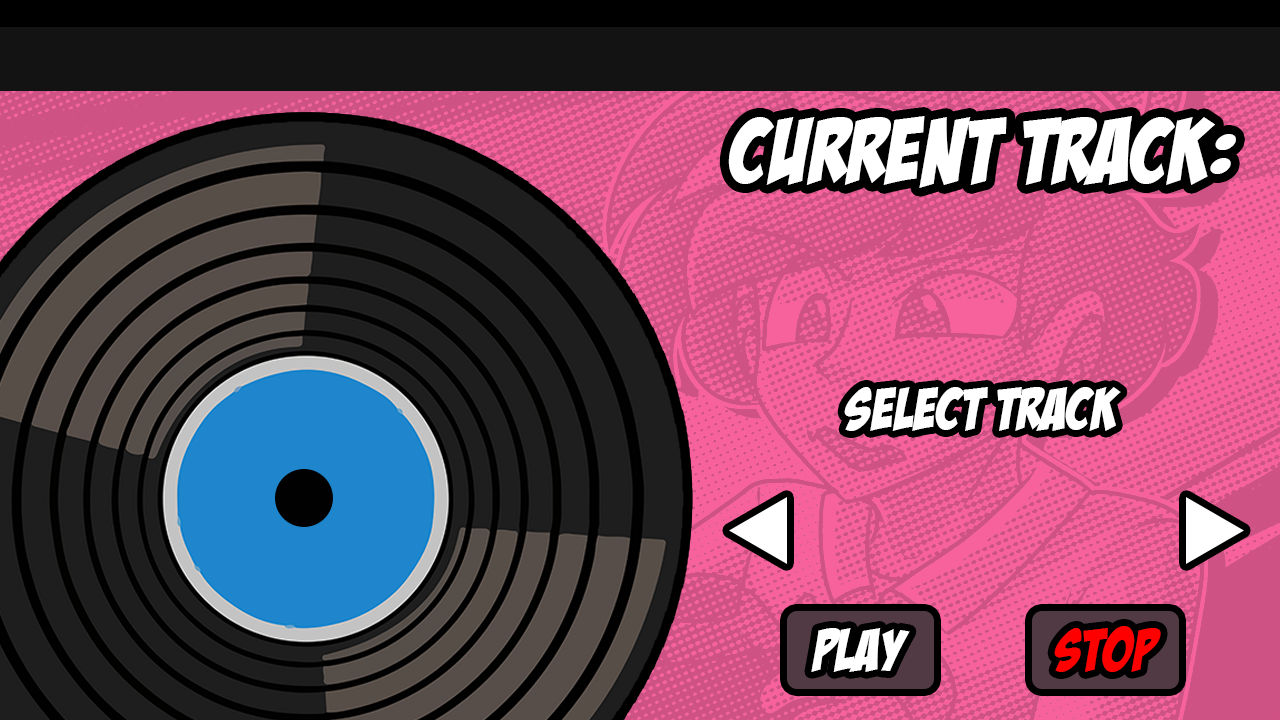
<style>
.page{position:relative;width:1280px;height:720px}
.page>*{position:absolute;margin:0}
.t1{font:91.7px "BadaBoomBB";letter-spacing:0.02em;color:#ffffff}
.t2{font:58.3px "BadaBoomBB";letter-spacing:0.02em;color:#ffffff}
.t3{font:58.3px "BadaBoomBB";letter-spacing:0.02em;color:#ff0000}
</style>
<div class="page">
<p class="t1" style="left:728px;top:116px;width:508px;height:72px">current track:</p>
<p class="t2" style="left:844px;top:387px;width:277px;height:44px">select track</p>
<p class="t2" style="left:811px;top:628px;width:99px;height:44px">play</p>
<p class="t3" style="left:1054px;top:626px;width:107px;height:46px">stop</p>
</div>
